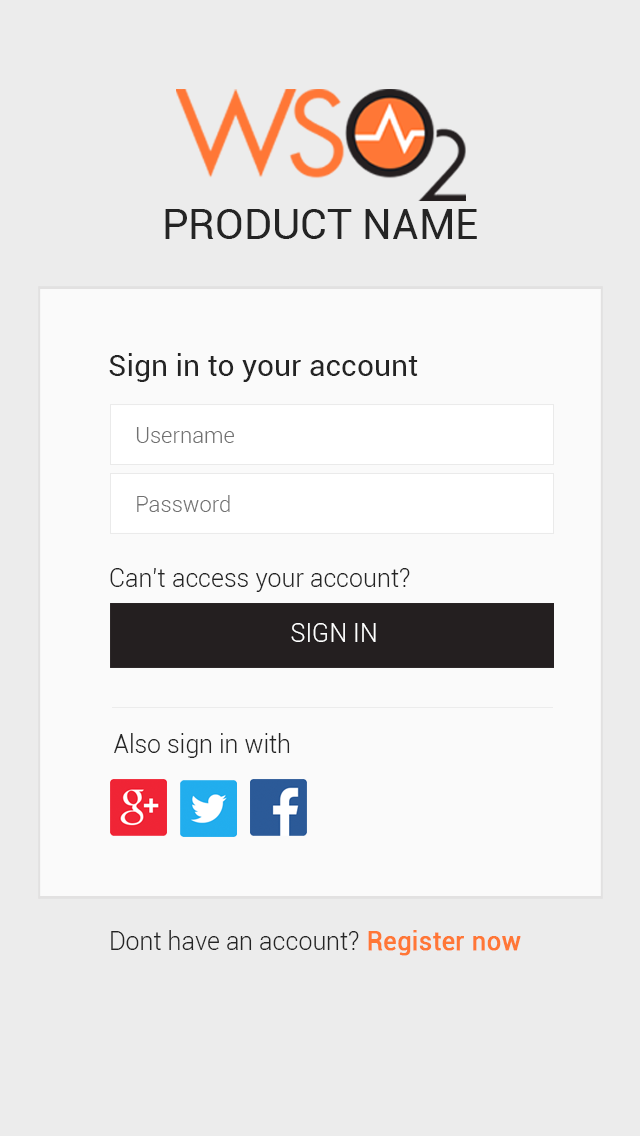
<style>
.page{position:relative;width:640px;height:1136px;background:#ececec}
.page>*{position:absolute;margin:0}
.t1{font:42.1px "Roboto-Regular";color:#242424;text-transform:uppercase}
.t2{font:30px "Roboto-Regular";color:#242424}
.t3{font:22px "Roboto-Light";color:#717171}
.t4{font:25px "Roboto-Light";color:#242424}
.t5{font:25px "Roboto-Light";color:#ffffff;text-transform:uppercase}
.t6{font:25px "Roboto-Regular";color:#ff7736;font-weight:bold}
</style>
<div class="page">
<p class="t1" style="left:165px;top:209px;width:312px;height:30px">Product Name</p>
<p class="t2" style="left:109px;top:353px;width:309px;height:29px">Sign in to your account</p>
<p class="t3" style="left:136px;top:427px;width:98px;height:16px">Username</p>
<p class="t3" style="left:137px;top:495px;width:93px;height:17px">Password</p>
<p class="t4" style="left:110px;top:568px;width:300px;height:24px">Can’t access your account?</p>
<p class="t5" style="left:291px;top:623px;width:85px;height:19px">Sign in</p>
<p class="t4" style="left:114px;top:733px;width:176px;height:25px">Also sign in with</p>
<p class="t4" style="left:111px;top:930px;width:410px;height:26px">Dont have an account?<span class="t6"> Register now</span></p>
</div>
